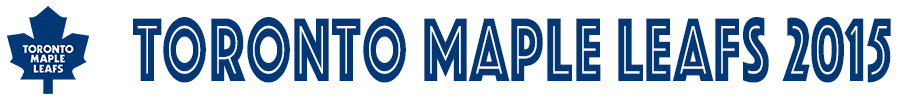
<style>
.page{position:relative;width:900px;height:100px;background:#ffffff}
.page>*{position:absolute;margin:0}
.t1{font:93.7px "Phosphate-Inline";letter-spacing:0.02em;color:#003876;scale:0.65 1}
</style>
<div class="page">
<p class="t1" style="left:133px;top:17px;width:758px;height:66px">Toronto Maple Leafs 2015</p>
</div>
